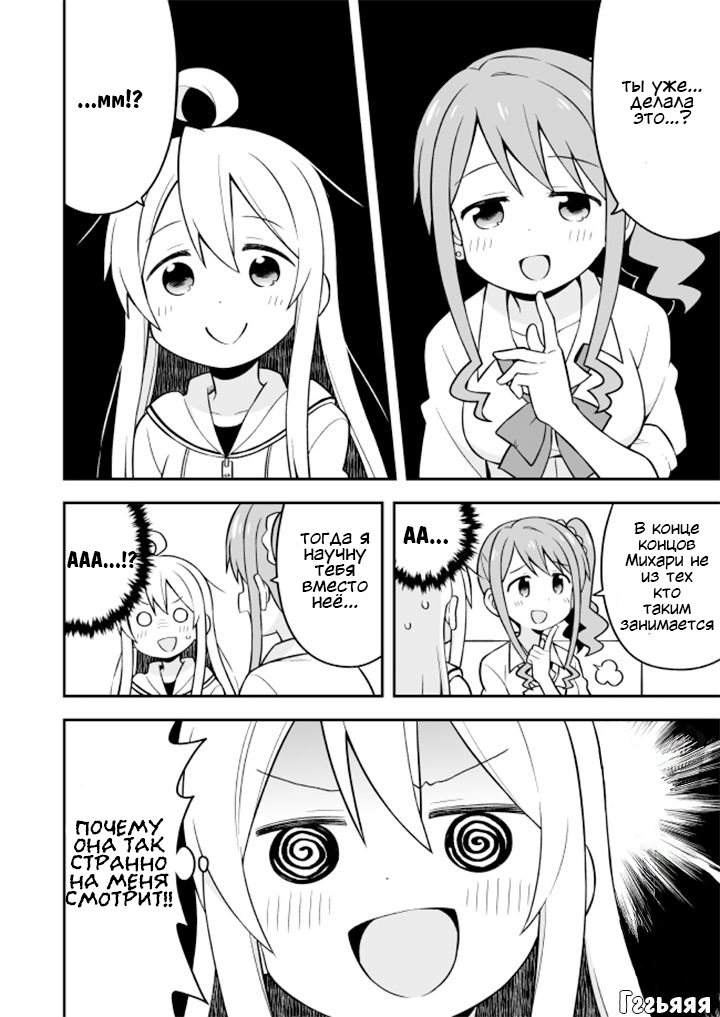
<style>
.page{position:relative;width:720px;height:1017px;background:#ffffff}
.page>*{position:absolute;margin:0}
.t1{font:24px "ADomInoBold";color:#000000}
.t2{font:18px/16px "KuraiVoice2";color:#000000}
.t3{font:16px/16px "KuraiVoice2";color:#000000}
.t4{font:22px "ADomInoBold";color:#000000}
.t5{font:24px/18px "el_CCEvilSchemes";color:#000000}
.t6{font:30px "ADomInoBold";color:#ffffff}
</style>
<div class="page">
<p class="t1" style="left:78px;top:89px;width:65px;height:19px">...мм!?</p>
<p class="t2" style="left:621px;top:80px;width:81px;height:44px;text-align:center">ты уже...<br>делала<br>это…?</p>
<p class="t2" style="left:300px;top:532px;width:70px;height:76px;text-align:center">тогда я<br>научну<br>тебя<br>вместо<br>неё...</p>
<p class="t1" style="left:403px;top:526px;width:45px;height:18px">АА...</p>
<p class="t3" style="left:620px;top:522px;width:94px;height:109px;text-align:center">В конце<br>концов<br>Михари не<br>из тех<br>кто<br>таким<br>занимается</p>
<p class="t4" style="left:67px;top:551px;width:70px;height:17px">ААА...!?</p>
<p class="t5" style="left:65px;top:818px;width:108px;height:90px;text-align:center">Почему<br>она так<br>странно<br>на меня<br>смотрит!!</p>
<p class="t6" style="left:620px;top:991px;width:90px;height:22px">Гггьяяя</p>
</div>
